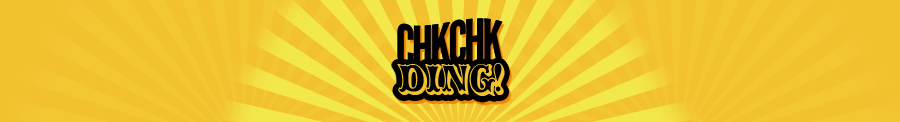
<style>
.page{position:relative;width:900px;height:122px;background:#f2c12e}
.page>*{position:absolute;margin:0}
.t1{font:56.8px "LeagueGothic";letter-spacing:-0.06em;color:#000000;text-transform:uppercase}
.t2{font:41.1px "CarnivalMFOpenShadow";letter-spacing:-0.06em;color:#f2c12e;text-transform:uppercase}
</style>
<div class="page">
<p class="t1" style="left:397px;top:18px;width:106px;height:50px">chkchk</p>
<p class="t2" style="left:397px;top:63px;width:108px;height:33px">DING!</p>
</div>
